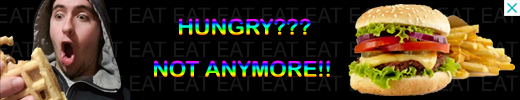
<style>
.page{position:relative;width:520px;height:100px;background:#000000}
.page>*{position:absolute;margin:0}
.t1{font:22px "ArialRoundedMTBold"}
</style>
<div class="page">
<p class="t1" style="left:179px;top:18px;width:132px;height:17px">HUNGRY???</p>
<p class="t1" style="left:154px;top:60px;width:176px;height:17px">NOT ANYMORE!!</p>
</div>
